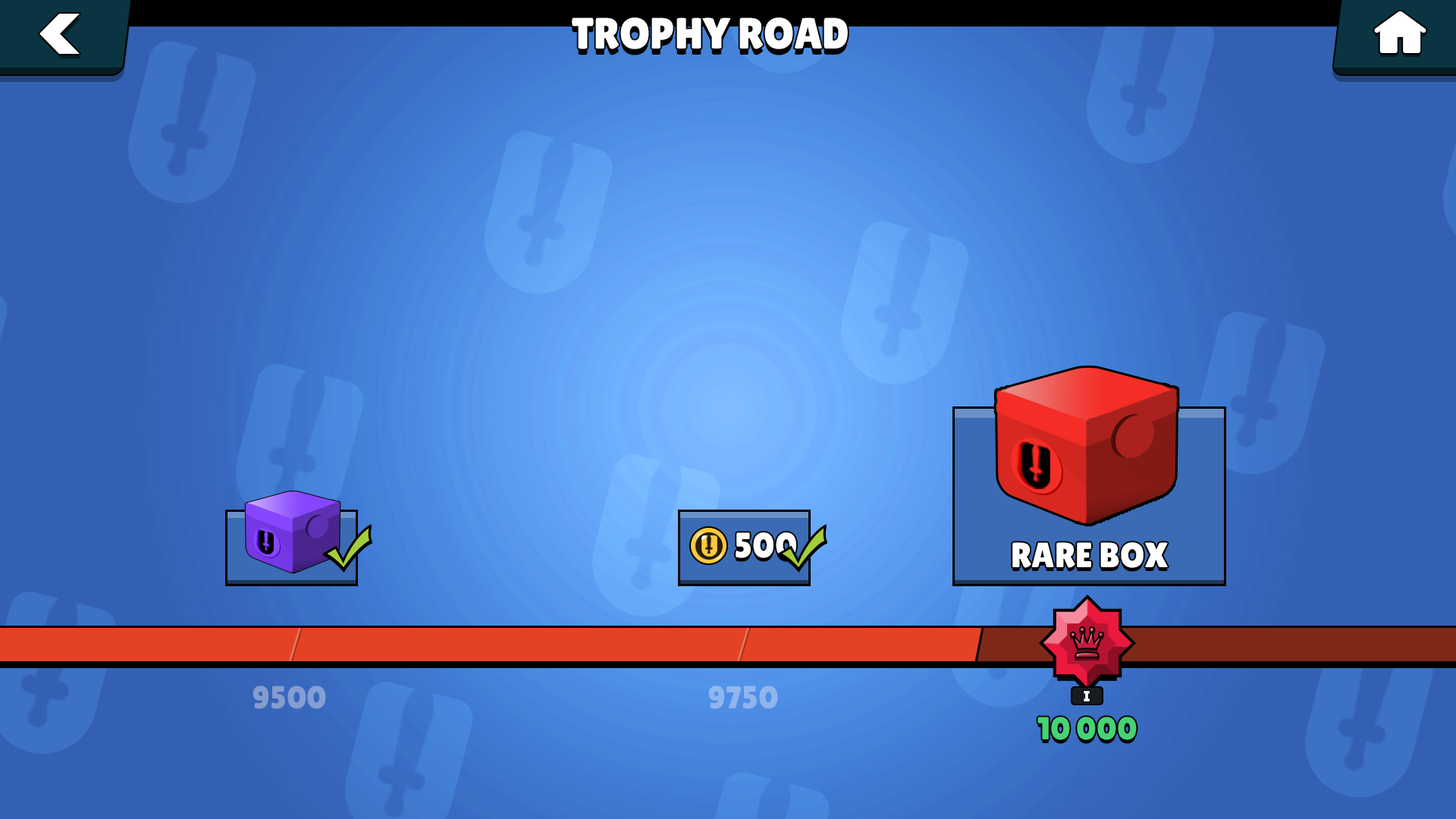
<style>
.page{position:relative;width:1456px;height:819px}
.page>*{position:absolute;margin:0}
.t1{font:43.6px "LilitaOne";color:#ffffff}
.t2{font:35.1px "LilitaOne";color:#ffffff}
.t3{font:31.7px "LilitaOne";color:#849dd3}
.t4{font:31.7px "LilitaOne";color:#8fb5ee}
.t5{font:15px "LilitaOne";color:#ffffff}
.t6{font:31.7px "LilitaOne";color:#47d276}
</style>
<div class="page">
<p class="t1" style="left:572px;top:17px;width:276px;height:32px">TROPHY ROAD</p>
<p class="t2" style="left:736px;top:532px;width:60px;height:26px">500</p>
<p class="t2" style="left:1012px;top:542px;width:156px;height:26px">RARE BOX</p>
<p class="t3" style="left:253px;top:686px;width:73px;height:23px">9500</p>
<p class="t4" style="left:708px;top:686px;width:70px;height:23px">9750</p>
<p class="t5" style="left:1084px;top:692px;width:6px;height:10px">I</p>
<p class="t5" style="left:1084px;top:691px;width:6px;height:10px">I</p>
<p class="t6" style="left:1037px;top:717px;width:100px;height:23px">10 000</p>
</div>
